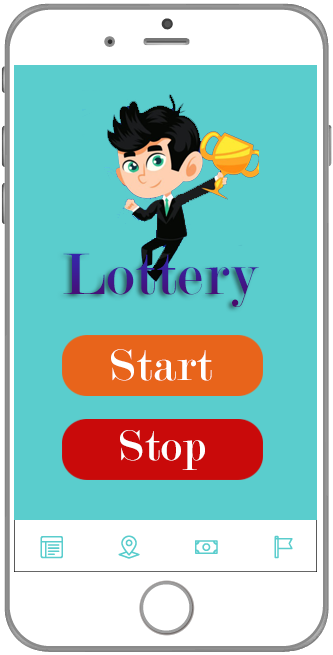
<style>
.page{position:relative;width:333px;height:655px;background:#5acdcd}
.page>*{position:absolute;margin:0}
.t1{font:62.5px "Modern-Regular";letter-spacing:0.025em;color:#3f188c}
.t2{font:47.5px "Modern-Regular";letter-spacing:0.025em;color:#ffffff}
.t3{font:46.5px "Modern-Regular";letter-spacing:0.025em;color:#ffffff}
</style>
<div class="page">
<p class="t1" style="left:63px;top:253px;width:196px;height:54px">Lottery</p>
<p class="t2" style="left:111px;top:349px;width:101px;height:32px">Start</p>
<p class="t3" style="left:120px;top:430px;width:85px;height:40px">Stop</p>
</div>
